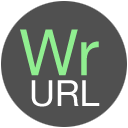
<style>
.page{position:relative;width:128px;height:128px;background:#505050}
.page>*{position:absolute;margin:0}
.t1{font:64px "HelveticaNeue";color:#90ee90}
.t2{font:36px "HelveticaNeue";color:#ffffff}
</style>
<div class="page">
<p class="t1" style="left:20px;top:29px;width:79px;height:47px">Wr</p>
<p class="t2" style="left:31px;top:80px;width:69px;height:27px">URL</p>
</div>
